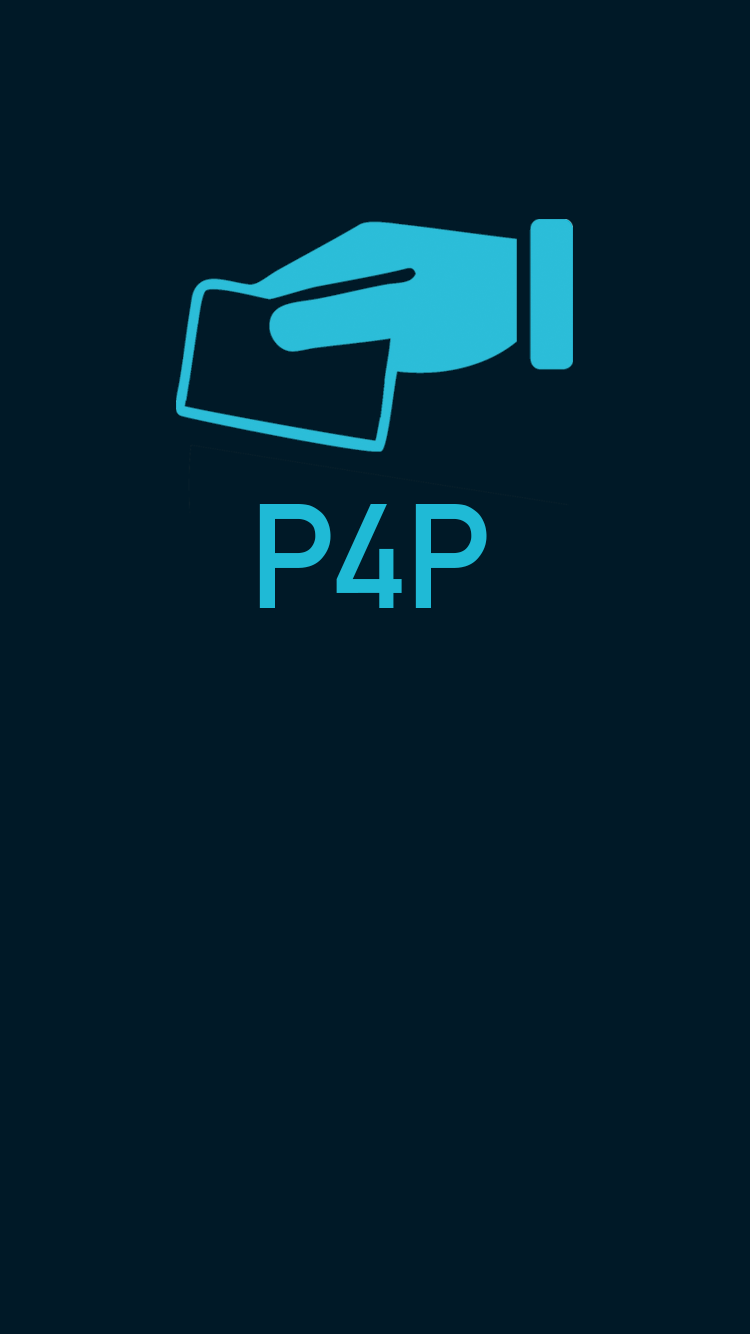
<style>
.page{position:relative;width:750px;height:1334px;background:#001927}
.page>*{position:absolute;margin:0}
.t1{font:145.8px "DINAlternate-Bold";color:#1fbad6}
</style>
<div class="page">
<p class="t1" style="left:259px;top:504px;width:228px;height:104px">P4P</p>
</div>
